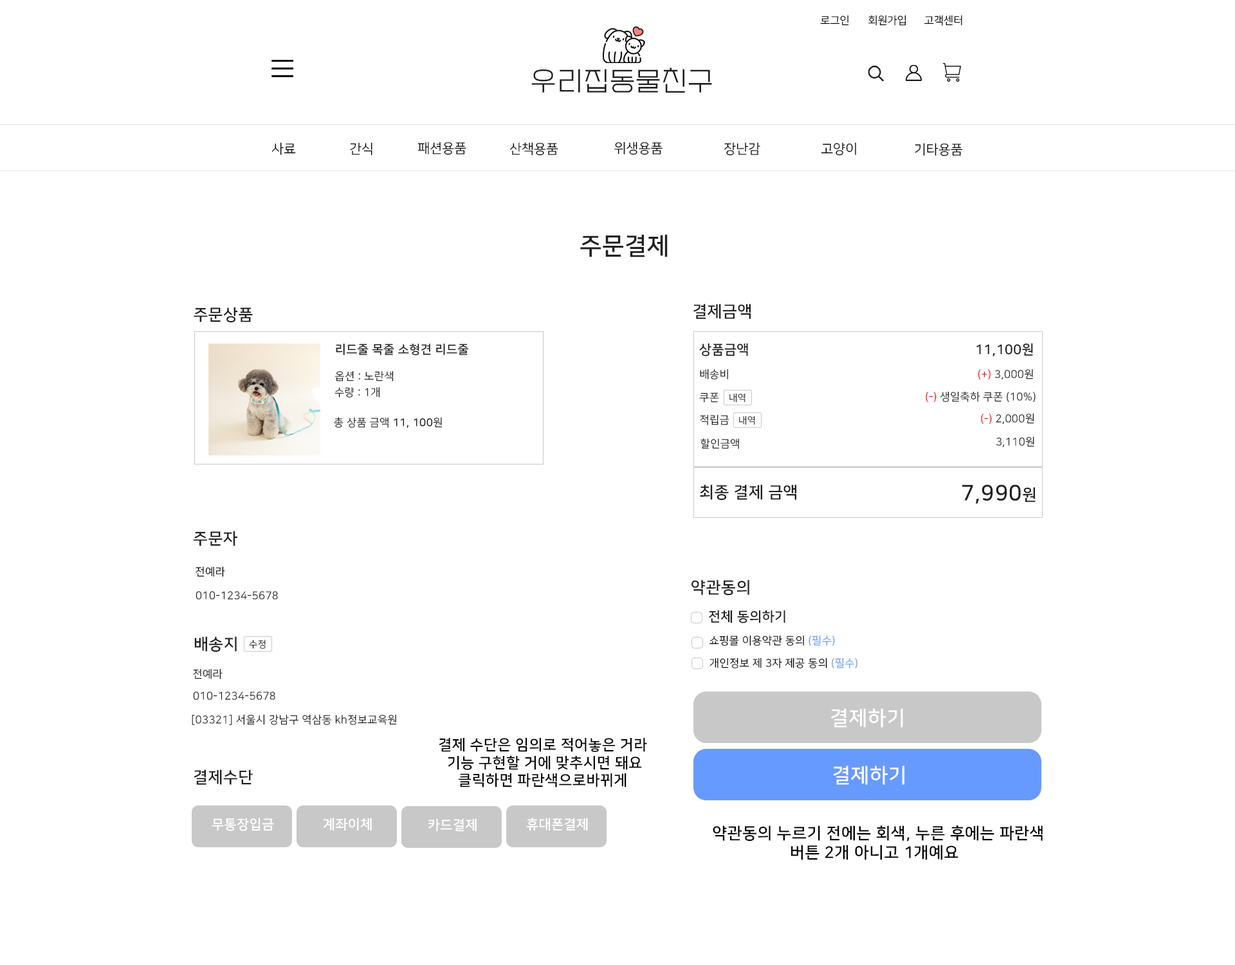
<style>
.page{position:relative;width:1235px;height:965px;background:#ffffff}
.page>*{position:absolute;margin:0}
.t1{font:10.7px "NanumSquareR";color:#000000}
.t2{font:26.8px "EF_watermelonSalad";letter-spacing:0.025em;color:#202020}
.t3{font:13.4px "NanumSquareR";color:#000000}
.t4{font:24.1px "NanumSquareB";letter-spacing:0.025em;color:#202020}
.t5{font:16.1px "NanumSquareB";letter-spacing:0.025em;color:#202020}
.t6{font:12.1px "NanumSquareB";letter-spacing:0.025em;color:#202020}
.t7{font:13.4px "NanumSquareB";letter-spacing:0.025em;color:#202020}
.t8{font:10.7px "NanumSquareR";letter-spacing:0.025em;color:#202020}
.t9{font:10.7px "NanumSquareR";letter-spacing:0.025em;color:#ff0000}
.t10{font:9.4px "NanumSquareR";letter-spacing:0.025em;color:#202020}
.t11{font:10.7px "NanumSquareB";letter-spacing:0.025em;color:#202020}
.t12{font:21.4px "NanumSquareB";letter-spacing:0.025em;color:#202020}
.t13{font:10.7px "NanumSquareR";letter-spacing:0.025em;color:#000000}
.t14{font:10.7px "NanumSquareR";letter-spacing:0.025em;color:#669aff}
.t15{font:20.2px "NanumSquareB";letter-spacing:0.025em;color:#ffffff}
.t16{font:14.7px "NanumSquareB";letter-spacing:0.025em;color:#000000}
.t17{font:20.1px "NanumSquareB";letter-spacing:0.025em;color:#ffffff}
.t18{font:13.4px "NanumSquareB";letter-spacing:0.025em;color:#ffffff}
.t19{font:16.1px "NanumSquareB";letter-spacing:0.025em;color:#000000}
</style>
<div class="page">
<p class="t1" style="left:820px;top:15px;width:29px;height:11px">로그인</p>
<p class="t1" style="left:869px;top:15px;width:38px;height:11px">회원가입</p>
<p class="t1" style="left:925px;top:15px;width:38px;height:11px">고객센터</p>
<p class="t2" style="left:531px;top:68px;width:181px;height:25px">우리집동물친구</p>
<p class="t3" style="left:272px;top:142px;width:24px;height:13px">사료</p>
<p class="t3" style="left:350px;top:142px;width:23px;height:14px">간식</p>
<p class="t3" style="left:418px;top:142px;width:49px;height:13px">패션용품</p>
<p class="t3" style="left:510px;top:142px;width:49px;height:14px">산책용품</p>
<p class="t3" style="left:615px;top:142px;width:48px;height:13px">위생용품</p>
<p class="t3" style="left:725px;top:142px;width:36px;height:14px">장난감</p>
<p class="t3" style="left:821px;top:142px;width:35px;height:14px">고양이</p>
<p class="t3" style="left:915px;top:143px;width:48px;height:13px">기타용품</p>
<p class="t4" style="left:580px;top:234px;width:88px;height:23px">주문결제</p>
<p class="t5" style="left:694px;top:304px;width:57px;height:15px">결제금액</p>
<p class="t5" style="left:194px;top:307px;width:59px;height:16px">주문상품</p>
<p class="t6" style="left:336px;top:344px;width:133px;height:12px">리드줄 목줄 소형견 리드줄</p>
<p class="t7" style="left:699px;top:343px;width:49px;height:13px">상품금액</p>
<p class="t7" style="left:977px;top:343px;width:56px;height:13px">11,100원</p>
<p class="t8" style="left:335px;top:371px;width:59px;height:11px">옵션 : 노란색</p>
<p class="t8" style="left:700px;top:369px;width:28px;height:11px">배송비</p>
<p class="t8" style="left:978px;top:369px;width:55px;height:11px"><span class="t9">(+)</span> 3,000원</p>
<p class="t8" style="left:335px;top:387px;width:45px;height:11px">수량 : 1개</p>
<p class="t8" style="left:699px;top:393px;width:20px;height:10px">쿠폰</p>
<p class="t10" style="left:730px;top:393px;width:16px;height:10px">내역</p>
<p class="t8" style="left:926px;top:391px;width:110px;height:11px">(-) 생일축하 쿠폰 (10%)</p>
<p class="t8" style="left:981px;top:413px;width:54px;height:12px"><span class="t9">(-)</span> 2,000원</p>
<p class="t8" style="left:334px;top:417px;width:108px;height:11px">총 상품 금액 <span class="t11">11, 100</span>원</p>
<p class="t8" style="left:700px;top:414px;width:30px;height:11px">적립금</p>
<p class="t10" style="left:739px;top:416px;width:16px;height:9px">내역</p>
<p class="t8" style="left:996px;top:436px;width:39px;height:12px">3,110원</p>
<p class="t8" style="left:701px;top:438px;width:38px;height:11px">할인금액</p>
<p class="t5" style="left:700px;top:485px;width:97px;height:16px">최종 결제 금액</p>
<p class="t12" style="left:963px;top:485px;width:73px;height:19px">7,990<span class="t5">원</span></p>
<p class="t5" style="left:193px;top:531px;width:44px;height:15px">주문자</p>
<p class="t13" style="left:196px;top:566px;width:29px;height:11px">전예라</p>
<p class="t5" style="left:692px;top:580px;width:58px;height:16px">약관동의</p>
<p class="t8" style="left:196px;top:591px;width:82px;height:9px">010-1234-5678</p>
<p class="t7" style="left:709px;top:610px;width:77px;height:14px">전체 동의하기</p>
<p class="t5" style="left:194px;top:636px;width:43px;height:16px">배송지</p>
<p class="t10" style="left:249px;top:640px;width:17px;height:9px">수정</p>
<p class="t13" style="left:709px;top:635px;width:126px;height:11px">쇼핑몰 이용약관 동의 <span class="t14">(필수)</span></p>
<p class="t13" style="left:710px;top:658px;width:148px;height:11px">개인정보 제 3자 제공 동의 <span class="t14">(필수)</span></p>
<p class="t8" style="left:193px;top:669px;width:30px;height:10px">전예라</p>
<p class="t8" style="left:193px;top:692px;width:82px;height:8px">010-1234-5678</p>
<p class="t15" style="left:831px;top:708px;width:72px;height:20px">결제하기</p>
<p class="t8" style="left:192px;top:714px;width:205px;height:11px">[03321] 서울시 강남구 역삼동 kh정보교육원</p>
<p class="t16" style="left:439px;top:738px;width:208px;height:50px;text-align:center">결제 수단은 임의로 적어놓은 거라 <br>기능 구현할 거에 맞추시면 돼요<br>클릭하면 파란색으로바뀌게</p>
<p class="t5" style="left:194px;top:770px;width:59px;height:15px">결제수단</p>
<p class="t17" style="left:833px;top:766px;width:72px;height:19px">결제하기</p>
<p class="t18" style="left:212px;top:818px;width:62px;height:13px">무통장입금</p>
<p class="t18" style="left:323px;top:818px;width:49px;height:13px">계좌이체</p>
<p class="t18" style="left:428px;top:818px;width:49px;height:14px">카드결제</p>
<p class="t18" style="left:526px;top:818px;width:62px;height:13px">휴대폰결제</p>
<p class="t19" style="left:713px;top:826px;width:330px;height:34px;text-align:center">약관동의 누르기 전에는 회색, 누른 후에는 파란색<br>버튼 2개 아니고 1개예요</p>
</div>
